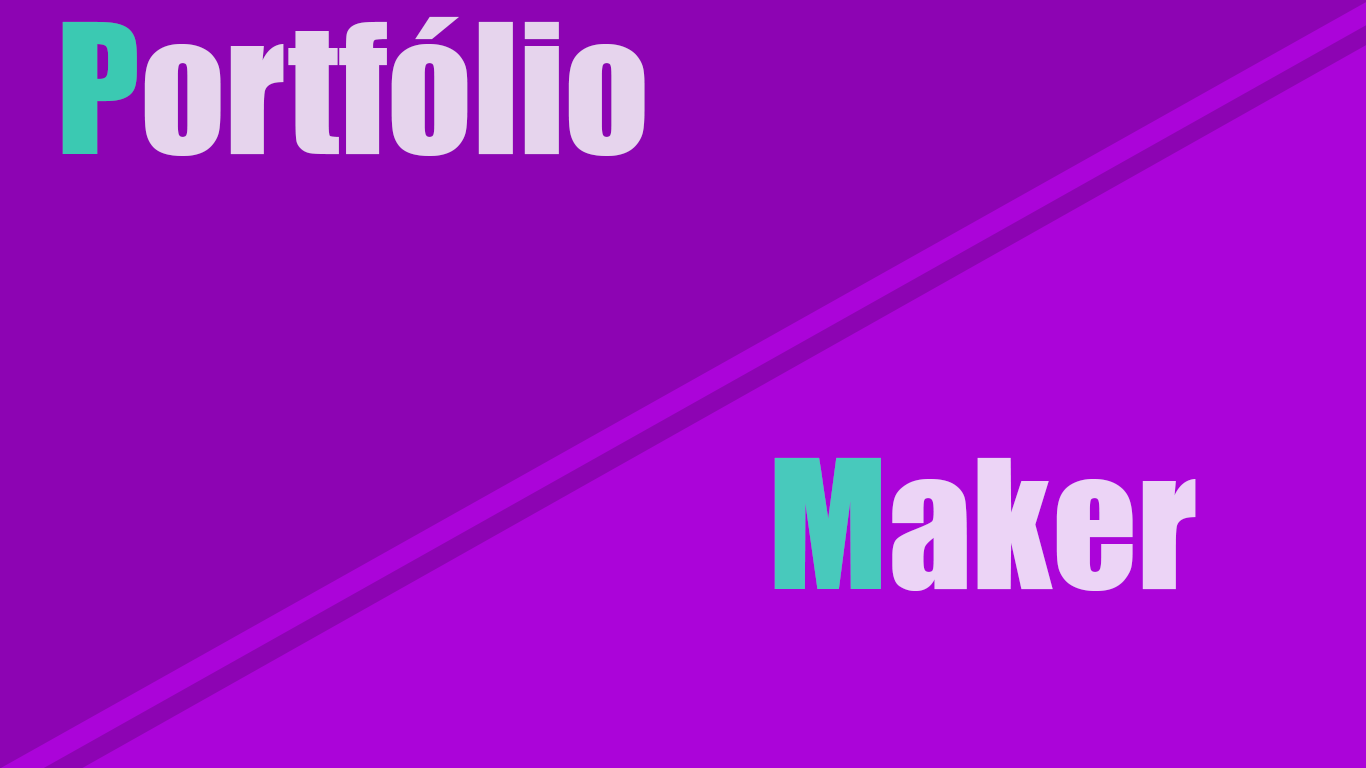
<style>
.page{position:relative;width:1366px;height:768px;background:#8d04b3}
.page>*{position:absolute;margin:0}
.t1{font:166.7px "Impact";letter-spacing:0.001em;color:#e6d4ed}
.t2{font:166.4px "Impact";letter-spacing:0.001em}
</style>
<div class="page">
<p class="t1" style="left:62px;top:16px;width:583px;height:140px">Portfólio</p>
<p class="t2" style="left:774px;top:457px;width:422px;height:134px">Maker</p>
</div>
